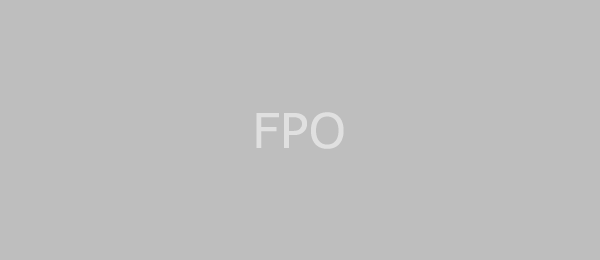
<style>
.page{position:relative;width:600px;height:260px;background:#bebebe}
.page>*{position:absolute;margin:0}
.t1{font:48px "Verdana";color:#e0e0e0}
</style>
<div class="page">
<p class="t1" style="left:256px;top:112px;width:88px;height:37px">FPO</p>
</div>
